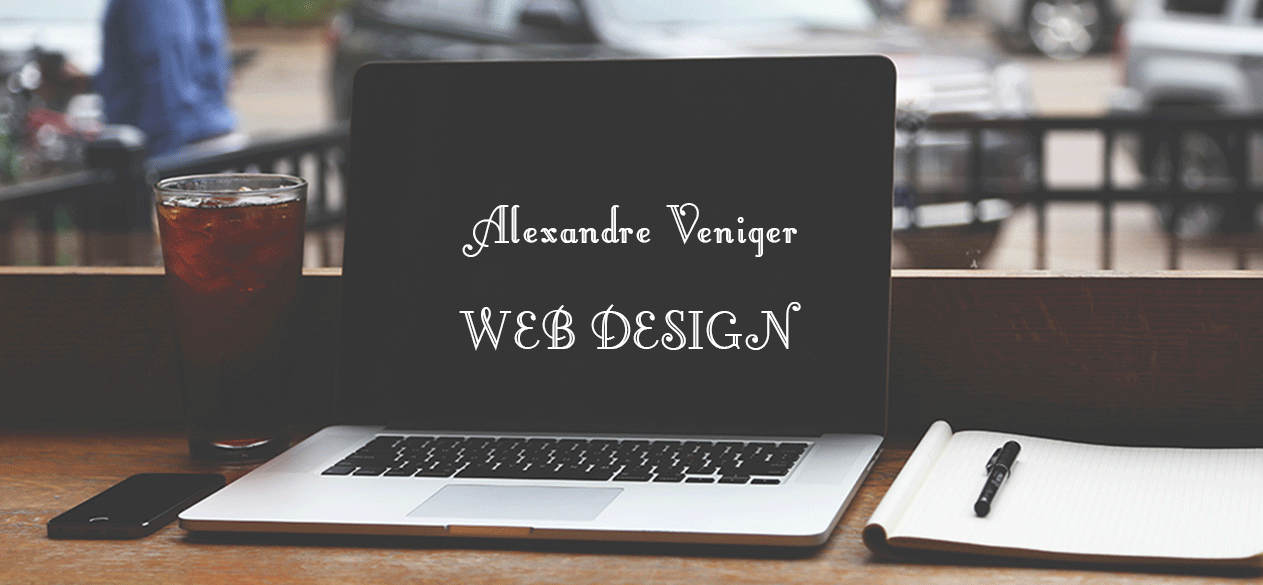
<style>
.page{position:relative;width:1263px;height:585px;background:#363636}
.page>*{position:absolute;margin:0}
.t1{font:65px "LittleLordFontleroyNF";color:#ffffff}
</style>
<div class="page">
<p class="t1" style="left:462px;top:203px;width:335px;height:54px">Alexandre Veniger</p>
<p class="t1" style="left:459px;top:302px;width:342px;height:49px">WEB DESIGN</p>
</div>
